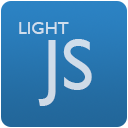
<style>
.page{position:relative;width:128px;height:128px}
.page>*{position:absolute;margin:0}
.t1{font:18px "GillSansMT";color:#cfdeed}
.t2{font:72px "GillSansMT";color:#cfdbe8}
</style>
<div class="page">
<p class="t1" style="left:19px;top:22px;width:50px;height:12px">LIGHT</p>
<p class="t2" style="left:38px;top:39px;width:54px;height:67px">JS</p>
</div>
